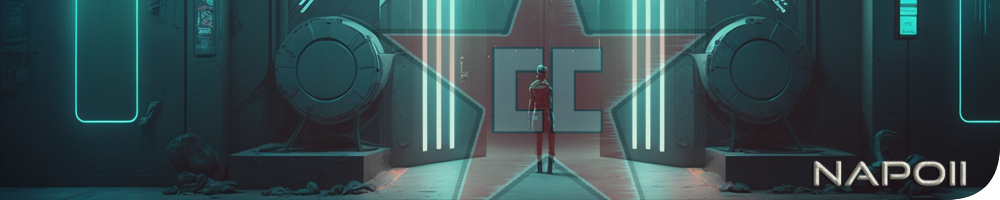
<style>
.page{position:relative;width:1000px;height:200px}
.page>*{position:absolute;margin:0}
.t1{font:31.9px "GoodTimesRg-Regular";letter-spacing:0.04em;scale:1.1 1}
</style>
<div class="page">
<p class="t1" style="left:814px;top:161px;width:152px;height:25px">NapoII</p>
</div>
